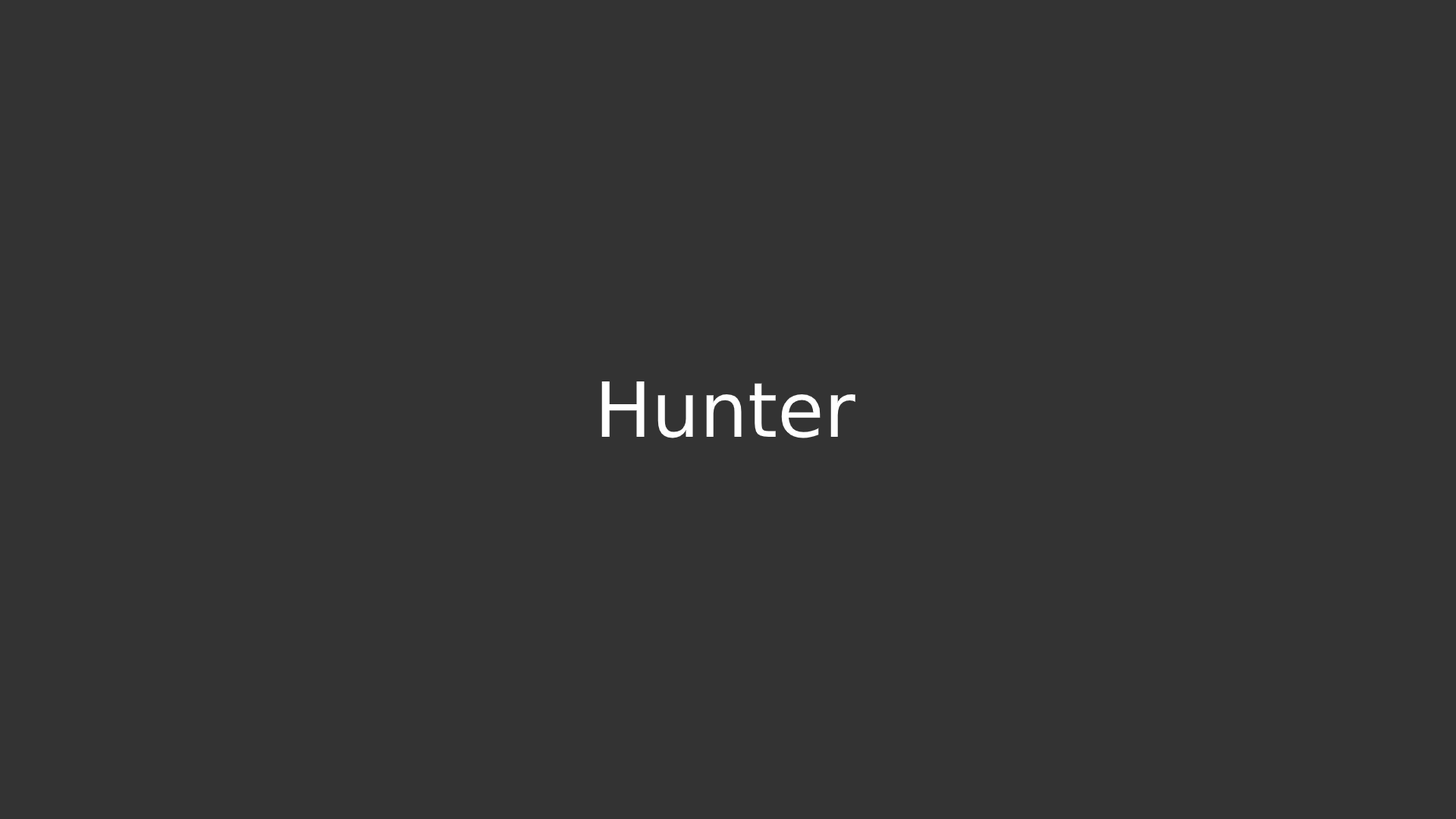
<style>
.page{position:relative;width:1456px;height:819px;background:#333333}
.page>*{position:absolute;margin:0}
.t1{font:75.8px "DejaVuSans";color:#ffffff}
</style>
<div class="page">
<p class="t1" style="left:601px;top:381px;width:254px;height:57px">Hunter</p>
</div>
